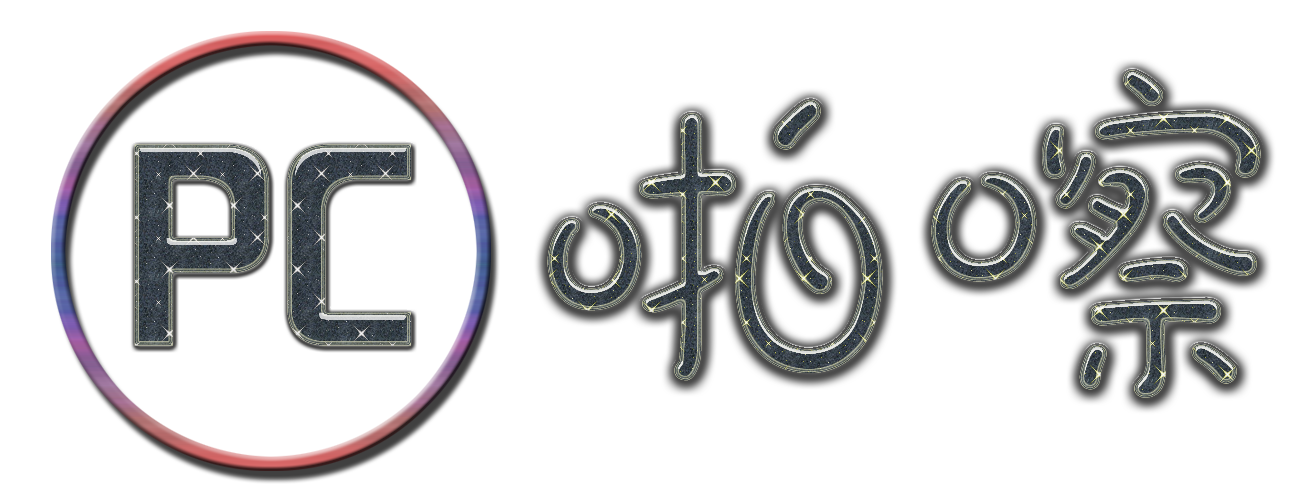
<style>
.page{position:relative;width:1300px;height:500px;background:#ffffff}
.page>*{position:absolute;margin:0}
.t1{font:393.5px "DFPao-W4-WIN-BF"}
.t2{font:248.3px "FZHZGBJW--GB1-0"}
</style>
<div class="page">
<p class="t1" style="left:547px;top:70px;width:714px;height:328px">啪嚓</p>
<p class="t2" style="left:134px;top:144px;width:277px;height:202px">PC</p>
</div>
